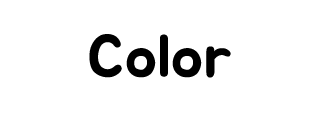
<style>
.page{position:relative;width:320px;height:120px;background:#ffffff}
.page>*{position:absolute;margin:0}
.t1{font:60px "Jua-Regular";color:#000000}
</style>
<div class="page">
<p class="t1" style="left:89px;top:34px;width:142px;height:44px">Color</p>
</div>
